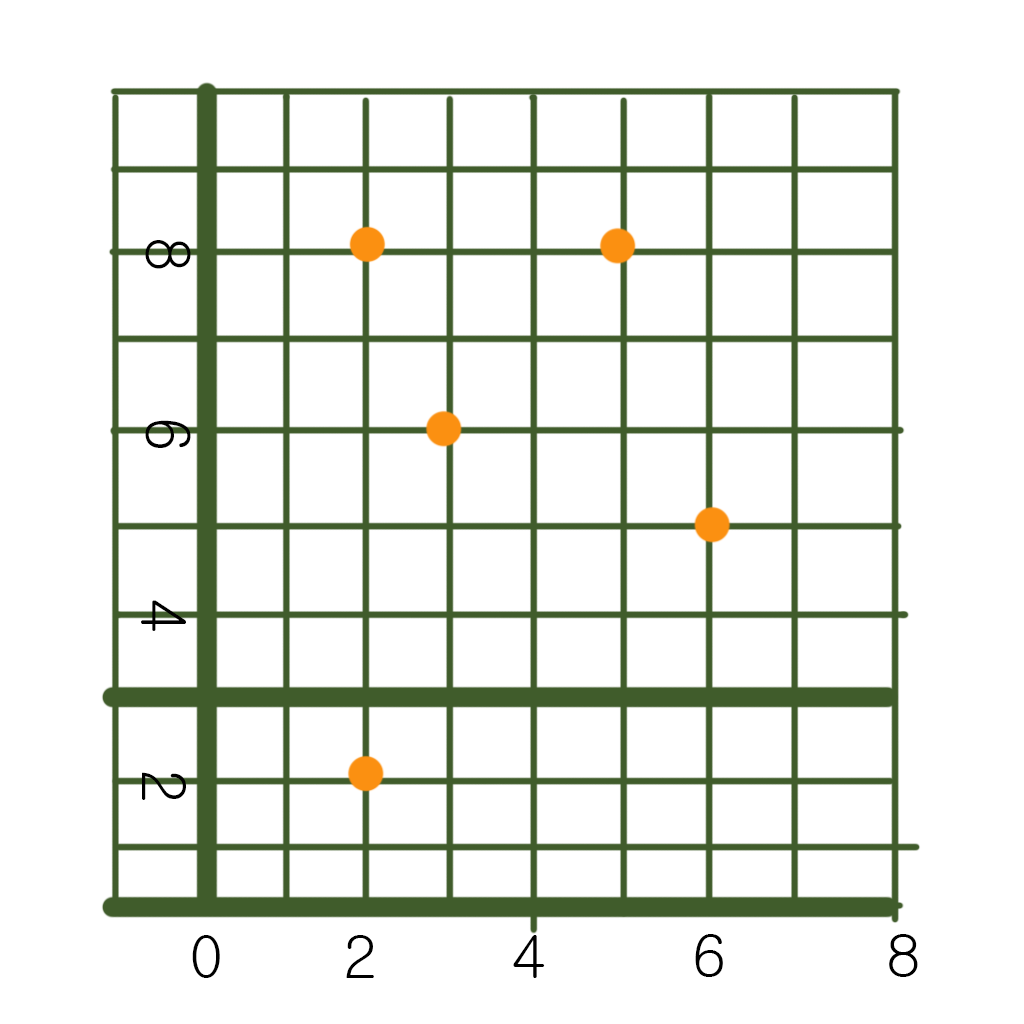
<style>
.page{position:relative;width:1024px;height:1024px;background:#ffffff}
.page>*{position:absolute;margin:0}
.t1{font:60px "Gulim";color:#000000}
</style>
<div class="page">
<p class="t1" style="left:145px;top:240px;width:46px;height:29px">8</p>
<p class="t1" style="left:145px;top:420px;width:46px;height:28px">6</p>
<p class="t1" style="left:141px;top:600px;width:45px;height:31px">4</p>
<p class="t1" style="left:142px;top:772px;width:44px;height:28px">2</p>
<p class="t1" style="left:192px;top:935px;width:28px;height:43px">0</p>
<p class="t1" style="left:346px;top:935px;width:28px;height:43px">2</p>
<p class="t1" style="left:513px;top:935px;width:32px;height:43px">4</p>
<p class="t1" style="left:695px;top:934px;width:28px;height:43px">6</p>
<p class="t1" style="left:889px;top:934px;width:29px;height:43px">8</p>
</div>
